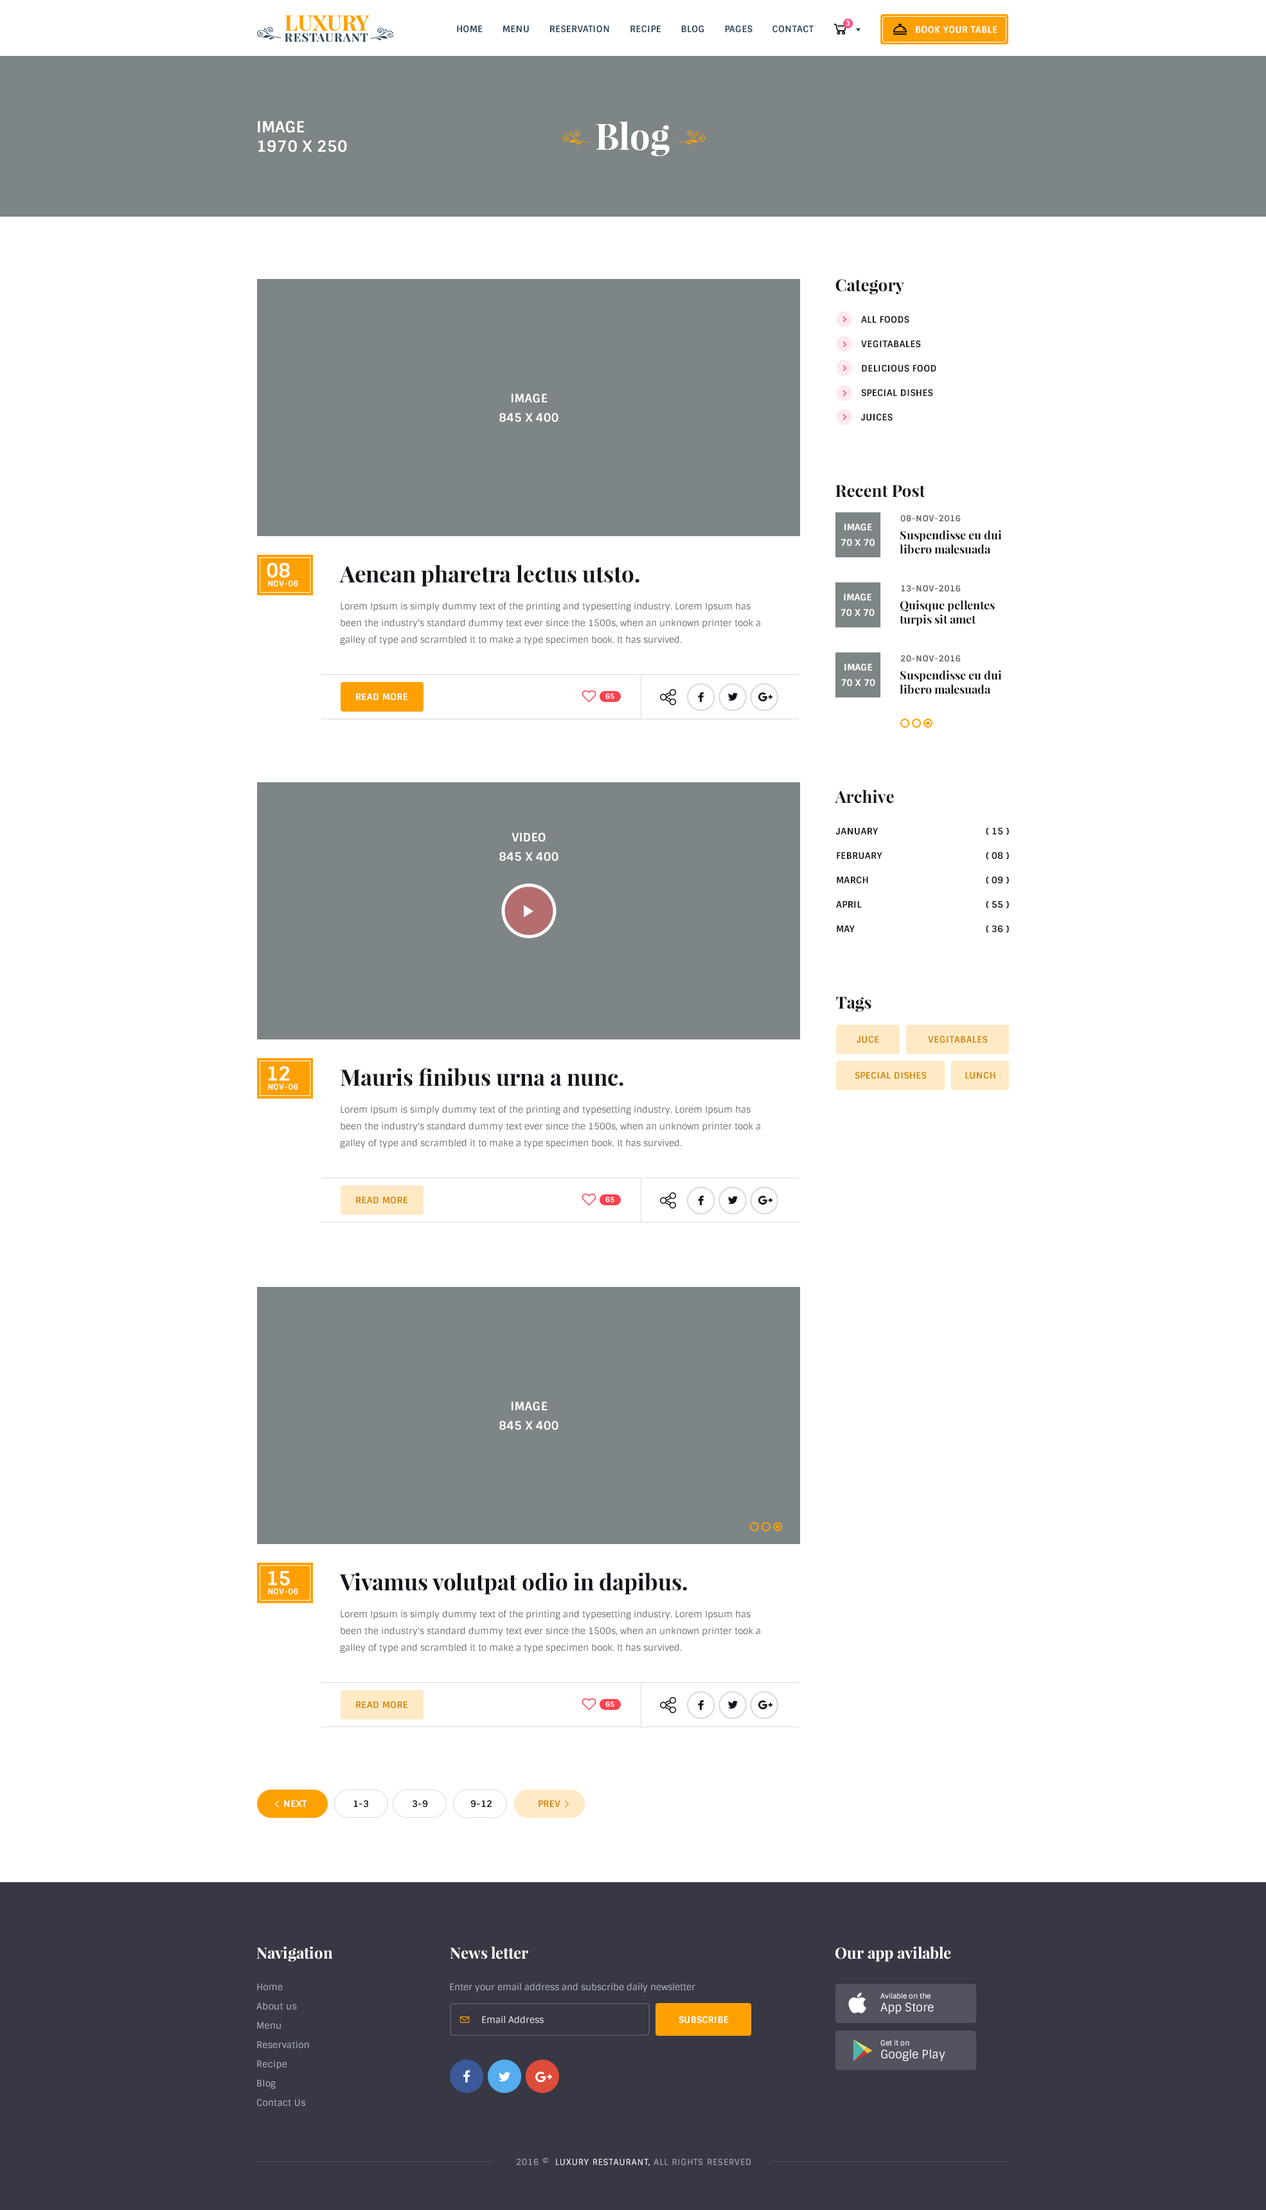
<style>
.page{position:relative;width:1266px;height:2210px;background:#ffffff}
.page>*{position:absolute;margin:0}
.t1{font:9px "Sintony-Bold";letter-spacing:0.025em;color:#2c465a;text-transform:uppercase}
.t2{font:7.1px "Sintony-Bold";letter-spacing:0.025em;color:#ffffff;text-transform:uppercase}
.t3{font:9px "Sintony-Bold";letter-spacing:0.025em;color:#ffffff;text-transform:uppercase}
.t4{font:15.4px/19.3px "Sintony-Bold";letter-spacing:0.005em;color:#ffffff;text-transform:uppercase}
.t5{font:36px "PlayfairDisplay-Bold";color:#ffffff}
.t6{font:16.7px "PlayfairDisplay-Bold";color:#14141d}
.t7{font:9px/24.4px "Sintony-Bold";letter-spacing:0.025em;color:#14141d;text-transform:uppercase}
.t8{font:11.6px/19.3px "Sintony-Bold";letter-spacing:0.005em;color:#ffffff;text-transform:uppercase}
.t9{font:8.4px "Sintony-Bold";letter-spacing:0.05em;color:#5c6369;text-transform:uppercase}
.t10{font:9px/15.4px "Sintony-Bold";letter-spacing:0.005em;color:#ffffff;text-transform:uppercase}
.t11{font:11.6px/14.1px "PlayfairDisplay-Bold";color:#14141d}
.t12{font:19.3px "Sintony-Bold";color:#ffffff}
.t13{font:22.5px "PlayfairDisplay-Bold";color:#14141d}
.t14{font:7.7px "Sintony-Bold";color:#ffffff;text-transform:uppercase}
.t15{font:9px/16.7px "Sintony";color:#5c6369}
.t16{font:9px "Sintony-Bold";letter-spacing:0.025em;color:#d38a0c;text-transform:uppercase}
.t17{font:9px "Sintony-Bold";color:#14141d}
.t18{font:15.4px "PlayfairDisplay-Bold";color:#ffffff}
.t19{font:9px/19.3px "Sintony";letter-spacing:0.025em;color:#adb2b7}
.t20{font:9px "Sintony";color:#adb2b7}
.t21{font:7.1px/12.9px "Sintony";color:#edf1f3}
.t22{font:11.6px/12.9px "Sintony";color:#edf1f3}
.t23{font:9px "Sintony";color:#e6e9eb}
.t24{font:8.4px "Sintony";letter-spacing:0.075em;color:#adb2b7;text-transform:uppercase}
.t25{font:8.4px "Sintony";letter-spacing:0.075em;color:#ffffff;text-transform:uppercase}
</style>
<div class="page">
<p class="t1" style="left:457px;top:25px;width:357px;height:8px">Home       menu       reservation       recipe       blog       Pages       contact</p>
<p class="t2" style="left:846px;top:20px;width:5px;height:6px">3</p>
<p class="t3" style="left:916px;top:26px;width:82px;height:7px">Book your table</p>
<p class="t4" style="left:258px;top:121px;width:89px;height:31px">Image<br>1970 x 250</p>
<p class="t5" style="left:596px;top:121px;width:74px;height:35px">Blog</p>
<p class="t6" style="left:836px;top:279px;width:69px;height:15px">Category</p>
<p class="t7" style="left:861px;top:316px;width:76px;height:105px">All foods<br>vegitabales<br>delicious food<br>Special dishes<br>juices</p>
<p class="t8" style="left:500px;top:393px;width:59px;height:29px;text-align:center">Image<br>845 x 400</p>
<p class="t6" style="left:836px;top:485px;width:90px;height:13px">Recent Post</p>
<p class="t9" style="left:901px;top:515px;width:60px;height:7px">08-nov-2016</p>
<p class="t10" style="left:841px;top:523px;width:34px;height:23px;text-align:center">Image<br>70 x 70</p>
<p class="t11" style="left:900px;top:530px;width:102px;height:24px">Suspendisse eu dui<br>libero malesuada</p>
<p class="t12" style="left:267px;top:562px;width:23px;height:16px">08</p>
<p class="t13" style="left:339px;top:564px;width:301px;height:23px">Aenean pharetra lectus utsto.</p>
<p class="t14" style="left:268px;top:580px;width:30px;height:7px">nov-06</p>
<p class="t10" style="left:841px;top:593px;width:34px;height:23px;text-align:center">Image<br>70 x 70</p>
<p class="t9" style="left:901px;top:585px;width:60px;height:7px">13-nov-2016</p>
<p class="t15" style="left:340px;top:602px;width:420px;height:43px">Lorem Ipsum is simply dummy text of the printing and typesetting industry. Lorem Ipsum has been the industry's standard dummy text ever since the 1500s, when an unknown printer took a galley of type and scrambled it to make a type specimen book. It has survived.</p>
<p class="t11" style="left:900px;top:600px;width:95px;height:26px">Quisque pellentes<br>turpis sit amet</p>
<p class="t10" style="left:842px;top:663px;width:34px;height:24px;text-align:center">Image<br>70 x 70</p>
<p class="t9" style="left:901px;top:655px;width:60px;height:7px">20-nov-2016</p>
<p class="t11" style="left:900px;top:670px;width:102px;height:24px">Suspendisse eu dui<br>libero malesuada</p>
<p class="t3" style="left:356px;top:693px;width:52px;height:8px">Read more</p>
<p class="t2" style="left:606px;top:693px;width:9px;height:6px">65</p>
<p class="t6" style="left:835px;top:789px;width:59px;height:15px">Archive</p>
<p class="t8" style="left:500px;top:833px;width:59px;height:28px;text-align:center">video<br>845 x 400</p>
<p class="t7" style="left:836px;top:827px;width:47px;height:105px">january<br>february<br>march<br>april<br>may</p>
<p class="t7" style="left:986px;top:827px;width:23px;height:106px">( 15 )<br>( 08 )<br>( 09 )<br>( 55 )<br>( 36 )</p>
<p class="t6" style="left:836px;top:996px;width:36px;height:16px">Tags</p>
<p class="t16" style="left:857px;top:1036px;width:22px;height:7px">Juce</p>
<p class="t16" style="left:928px;top:1036px;width:60px;height:7px">vegitabales</p>
<p class="t12" style="left:268px;top:1066px;width:22px;height:15px">12</p>
<p class="t13" style="left:341px;top:1068px;width:283px;height:18px">Mauris finibus urna a nunc.</p>
<p class="t16" style="left:855px;top:1072px;width:72px;height:7px">Special dishes</p>
<p class="t16" style="left:966px;top:1072px;width:30px;height:7px">lunch</p>
<p class="t14" style="left:268px;top:1084px;width:30px;height:6px">nov-06</p>
<p class="t15" style="left:340px;top:1106px;width:420px;height:43px">Lorem Ipsum is simply dummy text of the printing and typesetting industry. Lorem Ipsum has been the industry's standard dummy text ever since the 1500s, when an unknown printer took a galley of type and scrambled it to make a type specimen book. It has survived.</p>
<p class="t16" style="left:356px;top:1196px;width:52px;height:8px">Read more</p>
<p class="t2" style="left:606px;top:1196px;width:9px;height:7px">65</p>
<p class="t8" style="left:500px;top:1401px;width:59px;height:29px;text-align:center">Image<br>845 x 400</p>
<p class="t12" style="left:268px;top:1571px;width:22px;height:15px">15</p>
<p class="t13" style="left:339px;top:1572px;width:348px;height:23px">Vivamus volutpat odio in dapibus.</p>
<p class="t14" style="left:268px;top:1589px;width:30px;height:6px">nov-06</p>
<p class="t15" style="left:340px;top:1610px;width:420px;height:43px">Lorem Ipsum is simply dummy text of the printing and typesetting industry. Lorem Ipsum has been the industry's standard dummy text ever since the 1500s, when an unknown printer took a galley of type and scrambled it to make a type specimen book. It has survived.</p>
<p class="t16" style="left:356px;top:1701px;width:52px;height:8px">Read more</p>
<p class="t2" style="left:606px;top:1701px;width:9px;height:6px">65</p>
<p class="t3" style="left:284px;top:1800px;width:23px;height:7px">Next</p>
<p class="t17" style="left:354px;top:1800px;width:14px;height:8px">1-3</p>
<p class="t17" style="left:412px;top:1800px;width:16px;height:8px">3-9</p>
<p class="t17" style="left:471px;top:1800px;width:21px;height:8px">9-12</p>
<p class="t16" style="left:539px;top:1800px;width:22px;height:7px">prev</p>
<p class="t18" style="left:256px;top:1947px;width:77px;height:15px">Navigation</p>
<p class="t18" style="left:450px;top:1947px;width:78px;height:12px">News letter</p>
<p class="t18" style="left:836px;top:1947px;width:115px;height:15px">Our app avilable</p>
<p class="t19" style="left:256px;top:1983px;width:53px;height:124px">Home<br>About us<br>Menu<br>Reservation<br>Recipe<br>Blog<br>Contact Us</p>
<p class="t20" style="left:450px;top:1983px;width:246px;height:10px">Enter your email address and subscribe daily newsletter</p>
<p class="t21" style="left:881px;top:1993px;width:53px;height:22px">Avilable on the<br><span class="t22">App Store</span></p>
<p class="t23" style="left:482px;top:2016px;width:62px;height:8px">Email Address</p>
<p class="t3" style="left:679px;top:2016px;width:49px;height:8px">Subscribe</p>
<p class="t22" style="left:881px;top:2040px;width:65px;height:22px"><span class="t21">Get it on<br></span>Google Play</p>
<p class="t24" style="left:517px;top:2157px;width:234px;height:9px">2016 ©  <span class="t25">Luxury Restaurant,</span> All rights reserved</p>
</div>
